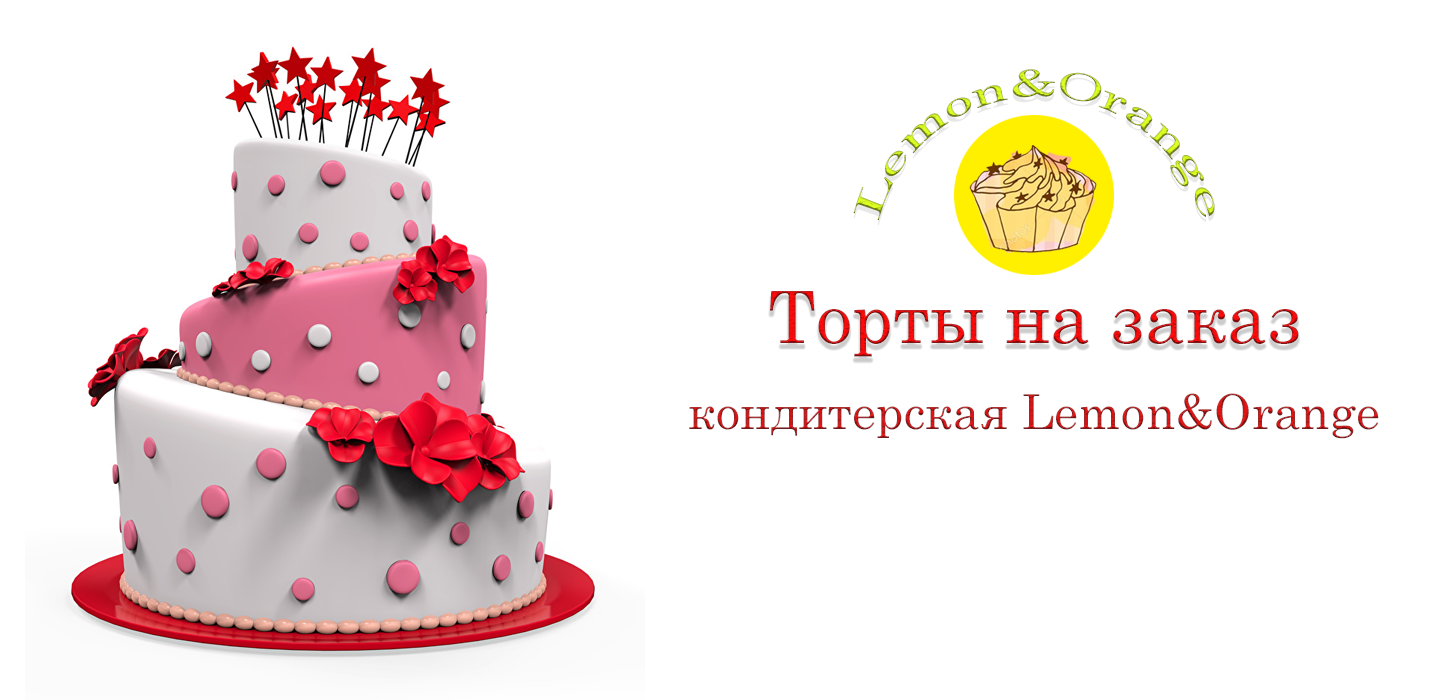
<style>
.page{position:relative;width:1450px;height:700px;background:#ffffff}
.page>*{position:absolute;margin:0}
.t1{font:40px "Century";letter-spacing:0.005em}
.t2{font:72px "Century";letter-spacing:0.005em}
.t3{font:48px "Century";letter-spacing:0.005em}
</style>
<div class="page">
<p class="t1" style="left:853px;top:69px;width:362px;height:152px">Lemon&amp;Orange</p>
<p class="t2" style="left:770px;top:291px;width:529px;height:66px">Торты на заказ</p>
<p class="t3" style="left:689px;top:393px;width:690px;height:46px">кондитерская Lemon&amp;Orange</p>
</div>
